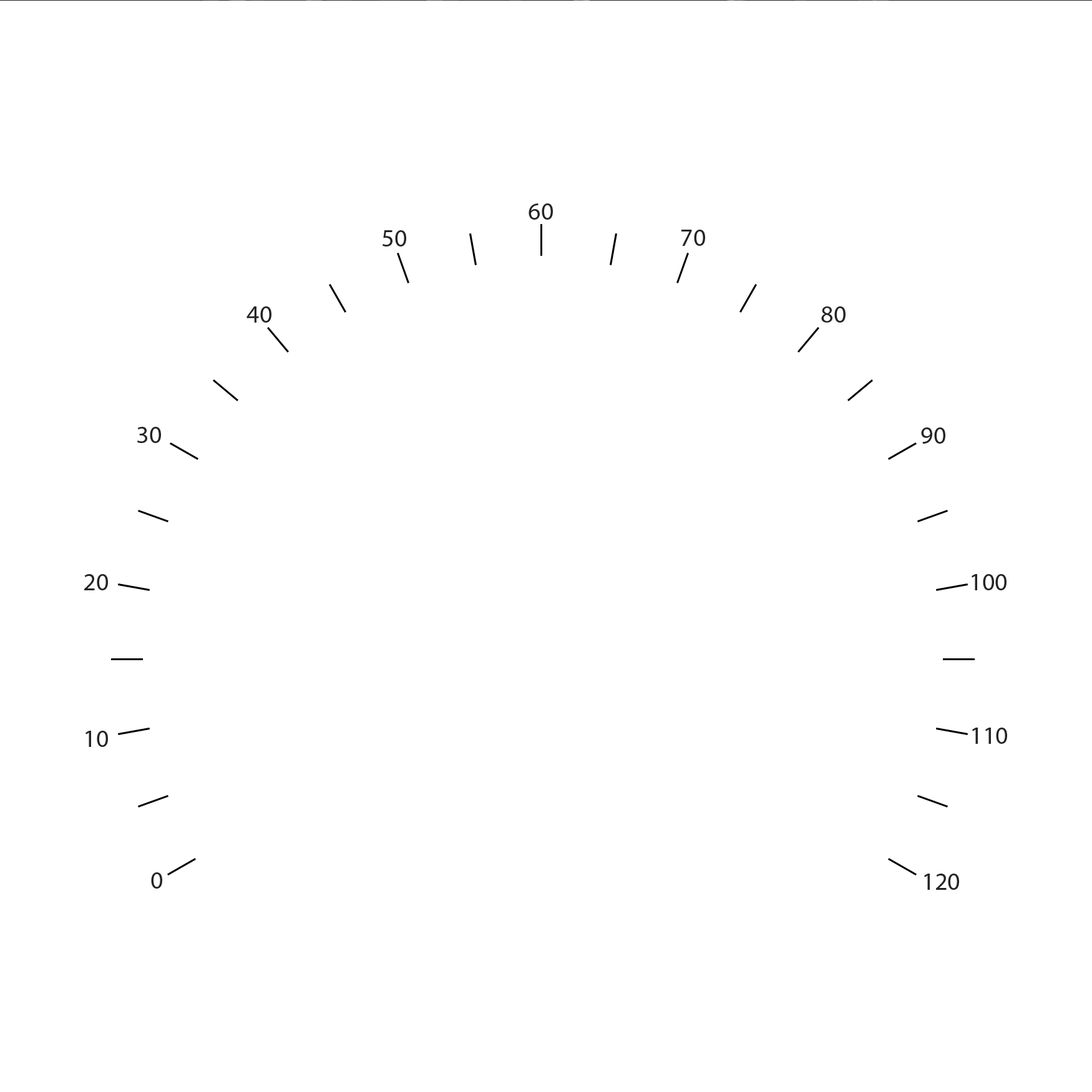
<style>
.page{position:relative;width:1092px;height:1092px;background:#ffffff}
.page>*{position:absolute;margin:0}
.t1{font:25px "MyriadPro-Regular";color:#242424}
</style>
<div class="page">
<p class="t1" style="left:529px;top:203px;width:24px;height:16px">60</p>
<p class="t1" style="left:383px;top:230px;width:23px;height:16px">50</p>
<p class="t1" style="left:681px;top:229px;width:24px;height:16px">70</p>
<p class="t1" style="left:246px;top:306px;width:25px;height:16px">40</p>
<p class="t1" style="left:821px;top:306px;width:25px;height:16px">80</p>
<p class="t1" style="left:137px;top:426px;width:24px;height:16px">30</p>
<p class="t1" style="left:921px;top:427px;width:24px;height:16px">90</p>
<p class="t1" style="left:84px;top:573px;width:24px;height:17px">20</p>
<p class="t1" style="left:972px;top:573px;width:34px;height:17px">100</p>
<p class="t1" style="left:85px;top:730px;width:23px;height:16px">10</p>
<p class="t1" style="left:972px;top:727px;width:35px;height:16px">110</p>
<p class="t1" style="left:151px;top:872px;width:11px;height:16px">0</p>
<p class="t1" style="left:924px;top:873px;width:35px;height:16px">120</p>
</div>
